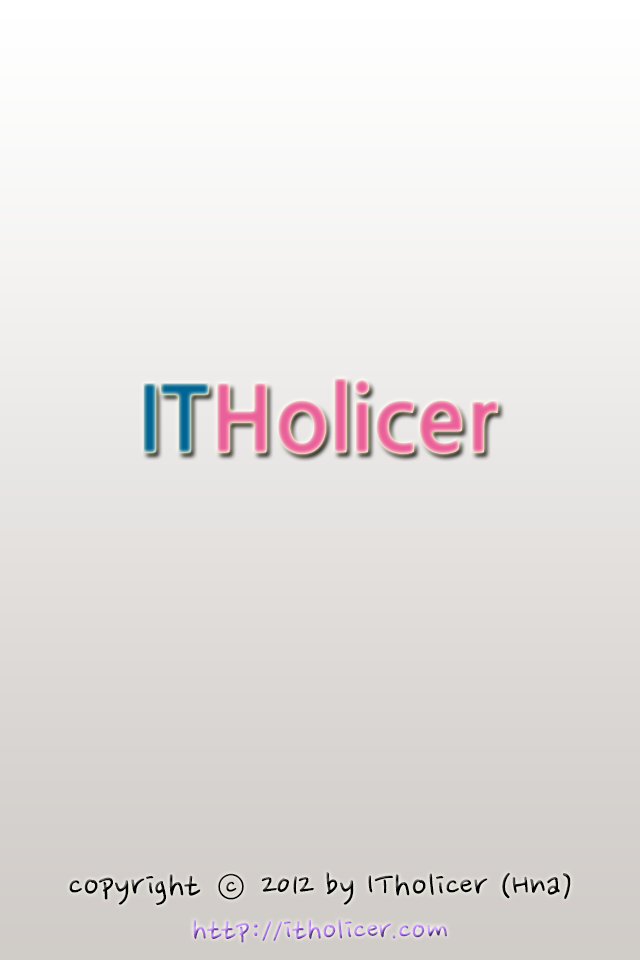
<style>
.page{position:relative;width:640px;height:960px}
.page>*{position:absolute;margin:0}
.t1{font:90px "NanumGothicOTFExtraBold"}
.t2{font:40px "NanumPen"}
.t3{font:36px "NanumPen"}
</style>
<div class="page">
<p class="t1" style="left:143px;top:378px;width:355px;height:76px">ITHolicer</p>
<p class="t2" style="left:69px;top:872px;width:502px;height:71px;text-align:center">copyright ⓒ 2012 by ITholicer (Hna)<br><span class="t3">http://itholicer.com</span></p>
</div>
